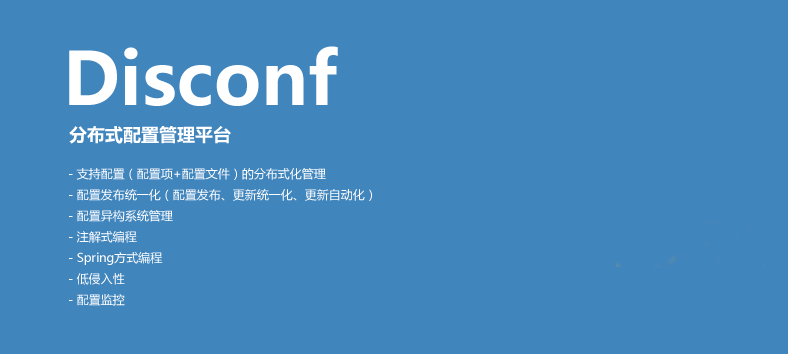
<style>
.page{position:relative;width:788px;height:354px;background:#4185bd}
.page>*{position:absolute;margin:0}
.t1{font:72px "MicrosoftYaHei-Bold";color:#ffffff}
.t2{font:18px "MicrosoftYaHei-Bold";color:#ffffff}
.t3{font:12px "MicrosoftYaHei";color:#ffffff}
</style>
<div class="page">
<p class="t1" style="left:69px;top:46px;width:269px;height:60px">Disconf</p>
<p class="t2" style="left:69px;top:126px;width:162px;height:18px">分布式配置管理平台</p>
<p class="t3" style="left:69px;top:167px;width:303px;height:139px">- 支持配置（配置项+配置文件）的分布式化管理<br>- 配置发布统一化（配置发布、更新统一化、更新自动化）<br>- 配置异构系统管理<br>- 注解式编程<br>- Spring方式编程<br>- 低侵入性<br>- 配置监控</p>
</div>
